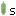
<style>
.page{position:relative;width:16px;height:16px;background:#ffffff}
.page>*{position:absolute;margin:0}
.t1{font:9px "Tahoma";color:#000000}
</style>
<div class="page">
<p class="t1" style="left:10px;top:8px;width:5px;height:7px">S</p>
</div>
